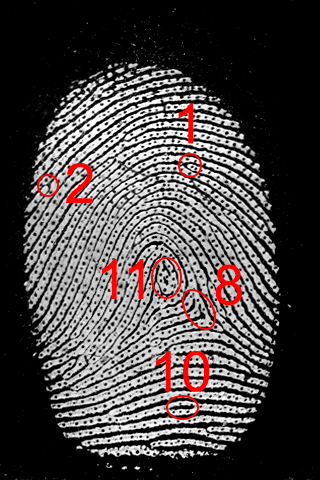
<style>
.page{position:relative;width:320px;height:480px;background:#000000}
.page>*{position:absolute;margin:0}
.t1{font:55.6px "ArialMT";color:#ff0000}
</style>
<div class="page">
<p class="t1" style="left:178px;top:103px;width:16px;height:41px">1</p>
<p class="t1" style="left:66px;top:163px;width:27px;height:40px">2</p>
<p class="t1" style="left:102px;top:259px;width:42px;height:40px">11</p>
<p class="t1" style="left:215px;top:264px;width:27px;height:42px">8</p>
<p class="t1" style="left:156px;top:351px;width:54px;height:41px">10</p>
</div>
